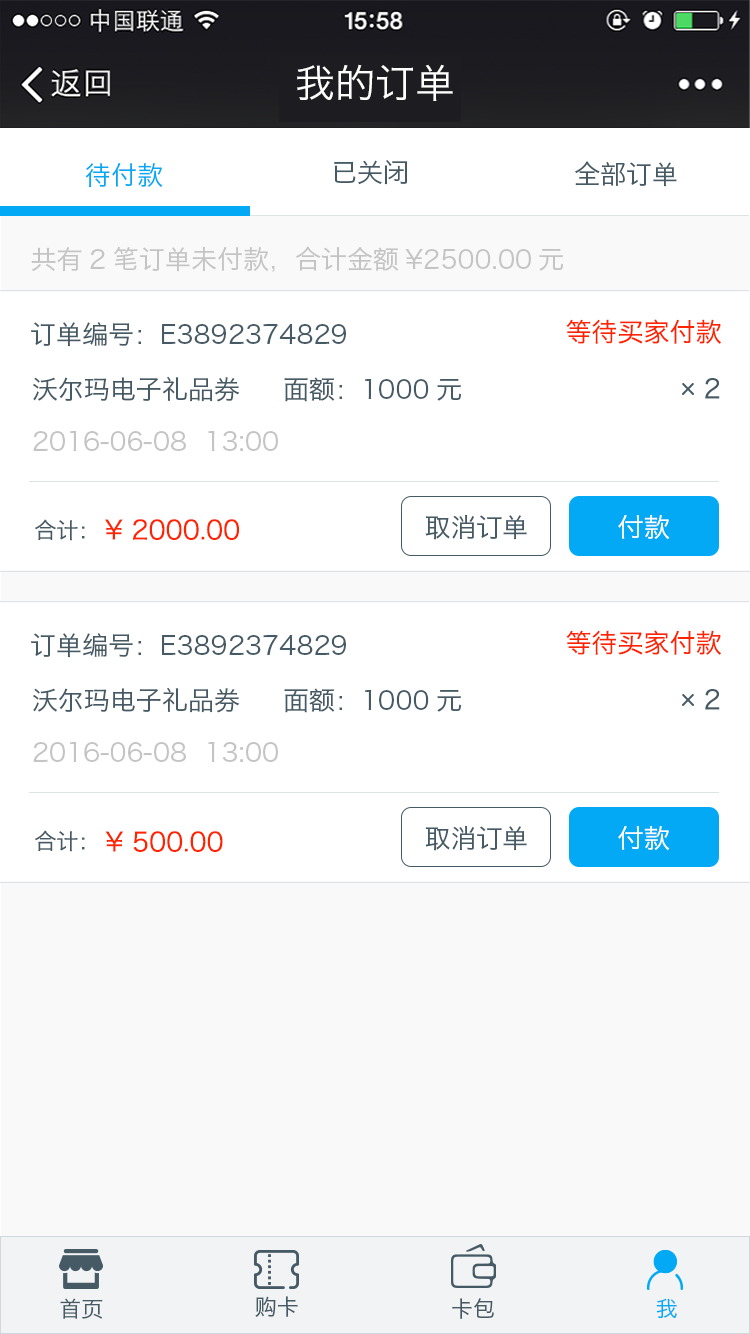
<style>
.page{position:relative;width:750px;height:1334px;background:#ffffff}
.page>*{position:absolute;margin:0}
.t1{font:40px "HiraginoSansGB-W3";color:#ffffff}
.t2{font:26px "HiraginoSansGB-W3";color:#455a64}
.t3{font:26px "HiraginoSansGB-W3";color:#03a9f4}
.t4{font:26px "HiraginoSansGB-W3";color:#c4c4c4}
.t5{font:26px "HiraginoSansGB-W3";color:#ff2400}
.t6{font:22px "HiraginoSansGB-W3";color:#455a64}
.t7{font:26px "HiraginoSansGB-W3";color:#ffffff}
.t8{font:21.9px "HiraginoSansGB-W3";color:#455a64}
.t9{font:22.1px "HiraginoSansGB-W3";color:#03a9f4}
</style>
<div class="page">
<p class="t1" style="left:297px;top:64px;width:156px;height:37px">我的订单</p>
<p class="t2" style="left:334px;top:160px;width:74px;height:25px">已关闭</p>
<p class="t2" style="left:575px;top:161px;width:102px;height:26px">全部订单</p>
<p class="t3" style="left:85px;top:163px;width:78px;height:25px">待付款</p>
<p class="t4" style="left:31px;top:246px;width:532px;height:26px">共有2笔订单未付款，合计金额¥2500.00元</p>
<p class="t2" style="left:31px;top:322px;width:315px;height:25px">订单编号：E3892374829</p>
<p class="t5" style="left:566px;top:319px;width:155px;height:25px">等待买家付款</p>
<p class="t2" style="left:33px;top:376px;width:428px;height:26px">沃尔玛电子礼品券     面额：1000元</p>
<p class="t2" style="left:705px;top:378px;width:15px;height:21px">2</p>
<p class="t4" style="left:33px;top:431px;width:245px;height:20px">2016-06-08  13:00</p>
<p class="t6" style="left:35px;top:519px;width:50px;height:22px">合计：</p>
<p class="t5" style="left:105px;top:519px;width:134px;height:21px">¥ 2000.00</p>
<p class="t2" style="left:425px;top:515px;width:102px;height:25px">取消订单</p>
<p class="t7" style="left:618px;top:515px;width:52px;height:25px">付款</p>
<p class="t5" style="left:566px;top:630px;width:155px;height:25px">等待买家付款</p>
<p class="t2" style="left:31px;top:633px;width:315px;height:25px">订单编号：E3892374829</p>
<p class="t2" style="left:33px;top:687px;width:428px;height:26px">沃尔玛电子礼品券     面额：1000元</p>
<p class="t2" style="left:705px;top:689px;width:15px;height:21px">2</p>
<p class="t4" style="left:33px;top:742px;width:245px;height:20px">2016-06-08  13:00</p>
<p class="t6" style="left:35px;top:830px;width:50px;height:22px">合计：</p>
<p class="t5" style="left:105px;top:831px;width:118px;height:21px">¥ 500.00</p>
<p class="t2" style="left:425px;top:826px;width:102px;height:25px">取消订单</p>
<p class="t7" style="left:618px;top:826px;width:52px;height:25px">付款</p>
<p class="t8" style="left:60px;top:1298px;width:43px;height:21px">首页</p>
<p class="t6" style="left:255px;top:1296px;width:43px;height:21px">购卡</p>
<p class="t6" style="left:452px;top:1298px;width:42px;height:21px">卡包</p>
<p class="t9" style="left:656px;top:1298px;width:21px;height:20px">我</p>
</div>
